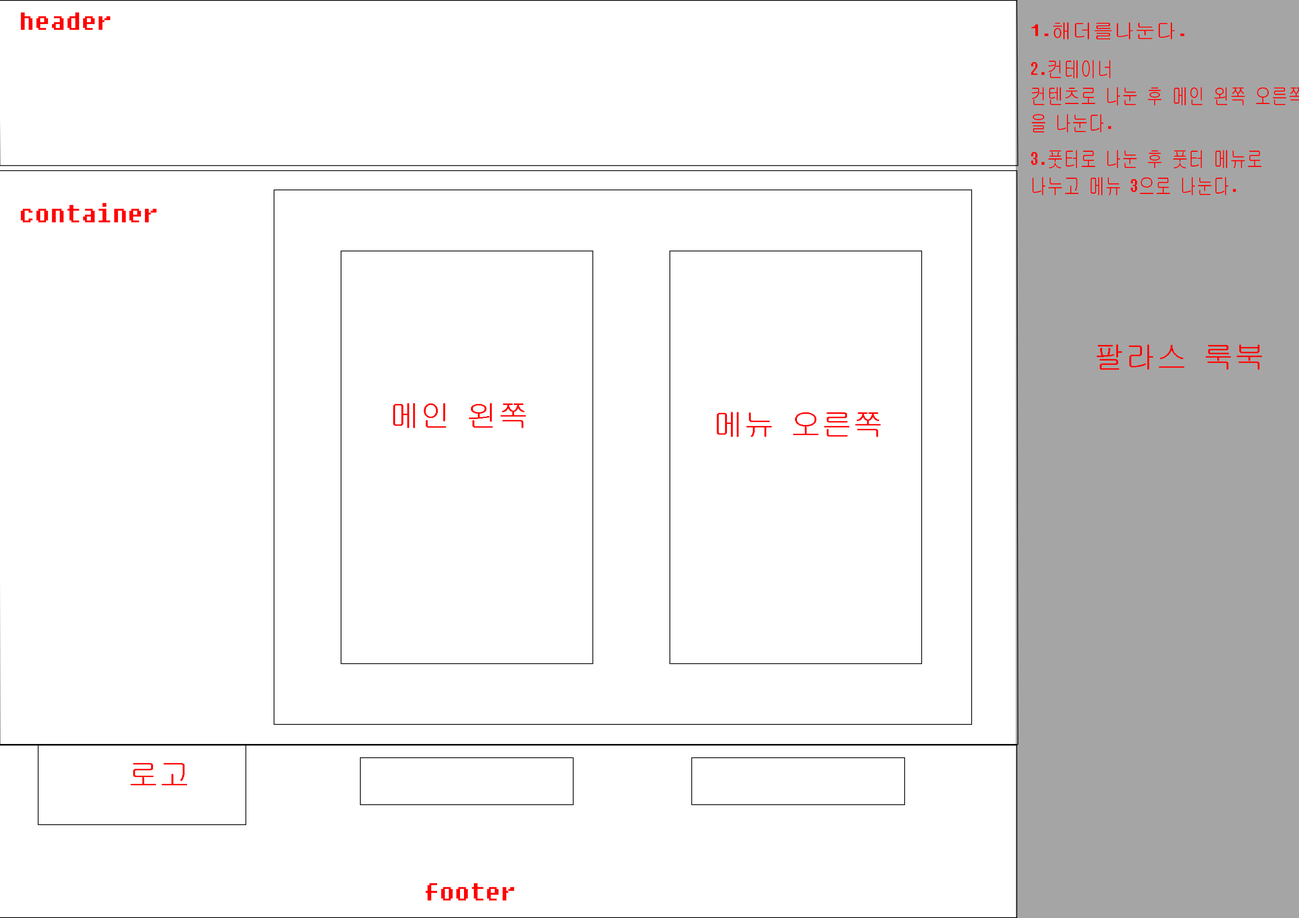
<style>
.page{position:relative;width:1299px;height:918px;background:#ffffff}
.page>*{position:absolute;margin:0}
.t1{font:31.1px "Fixedsys";color:#ff0000}
.t2{font:20.8px "Fixedsys";color:#ff0000}
.t3{font:22.6px "Fixedsys";color:#ff0000;scale:0.74 1}
.t4{font:30.9px "Fixedsys";color:#ff0000}
</style>
<div class="page">
<p class="t1" style="left:21px;top:12px;width:89px;height:18px">header</p>
<p class="t2" style="left:1031px;top:22px;width:153px;height:18px">1.해더를나눈다.</p>
<p class="t3" style="left:1031px;top:150px;width:230px;height:45px">3.풋터로 나눈 후 풋터 메뉴로 <br>나누고 메뉴 3으로 나눈다.</p>
<p class="t1" style="left:21px;top:203px;width:136px;height:20px">container</p>
<p class="t1" style="left:1096px;top:344px;width:166px;height:26px">팔라스 룩북</p>
<p class="t1" style="left:393px;top:403px;width:133px;height:25px">메인 왼쪽</p>
<p class="t1" style="left:716px;top:412px;width:164px;height:25px">메뉴 오른쪽</p>
<p class="t1" style="left:130px;top:763px;width:57px;height:23px">로고</p>
<p class="t4" style="left:425px;top:883px;width:89px;height:18px">footer</p>
</div>
